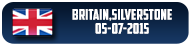
<style>
.page{position:relative;width:190px;height:45px}
.page>*{position:absolute;margin:0}
.t1{font:15px/14px "AmericanCaptain";color:#ffffff}
</style>
<div class="page">
<p class="t1" style="left:72px;top:9px;width:100px;height:25px;text-align:center">BRITAIN,SILVERSTONE<br>05-07-2015</p>
</div>
